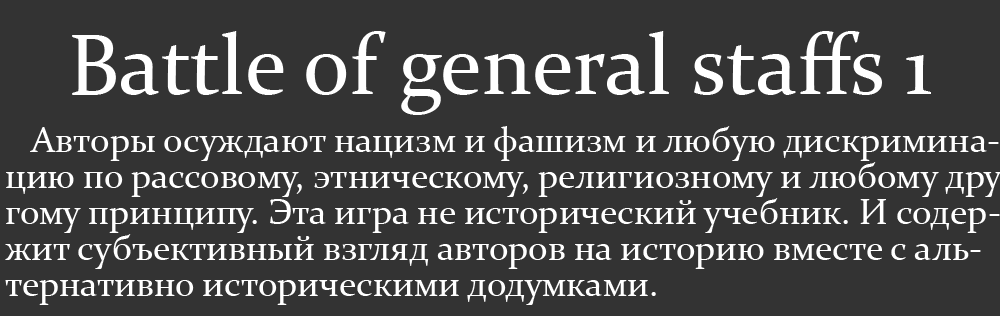
<style>
.page{position:relative;width:1000px;height:316px;background:#333333}
.page>*{position:absolute;margin:0}
.t1{font:86.4px "Constantia";color:#ffffff}
.t2{font:36px "Constantia";color:#ffffff}
</style>
<div class="page">
<p class="t1" style="left:72px;top:31px;width:859px;height:84px">Battle of general staffs 1</p>
<p class="t2" style="left:5px;top:126px;width:997px;height:179px">Авторы осуждают нацизм и фашизм и любую дискримина-<br>цию по рассовому, этническому, религиозному и любому дру<br>гому принципу. Эта игра не исторический учебник. И содер-<br>жит субъективный взгляд авторов на историю вместе с аль-<br>тернативно историческими додумками.</p>
</div>
